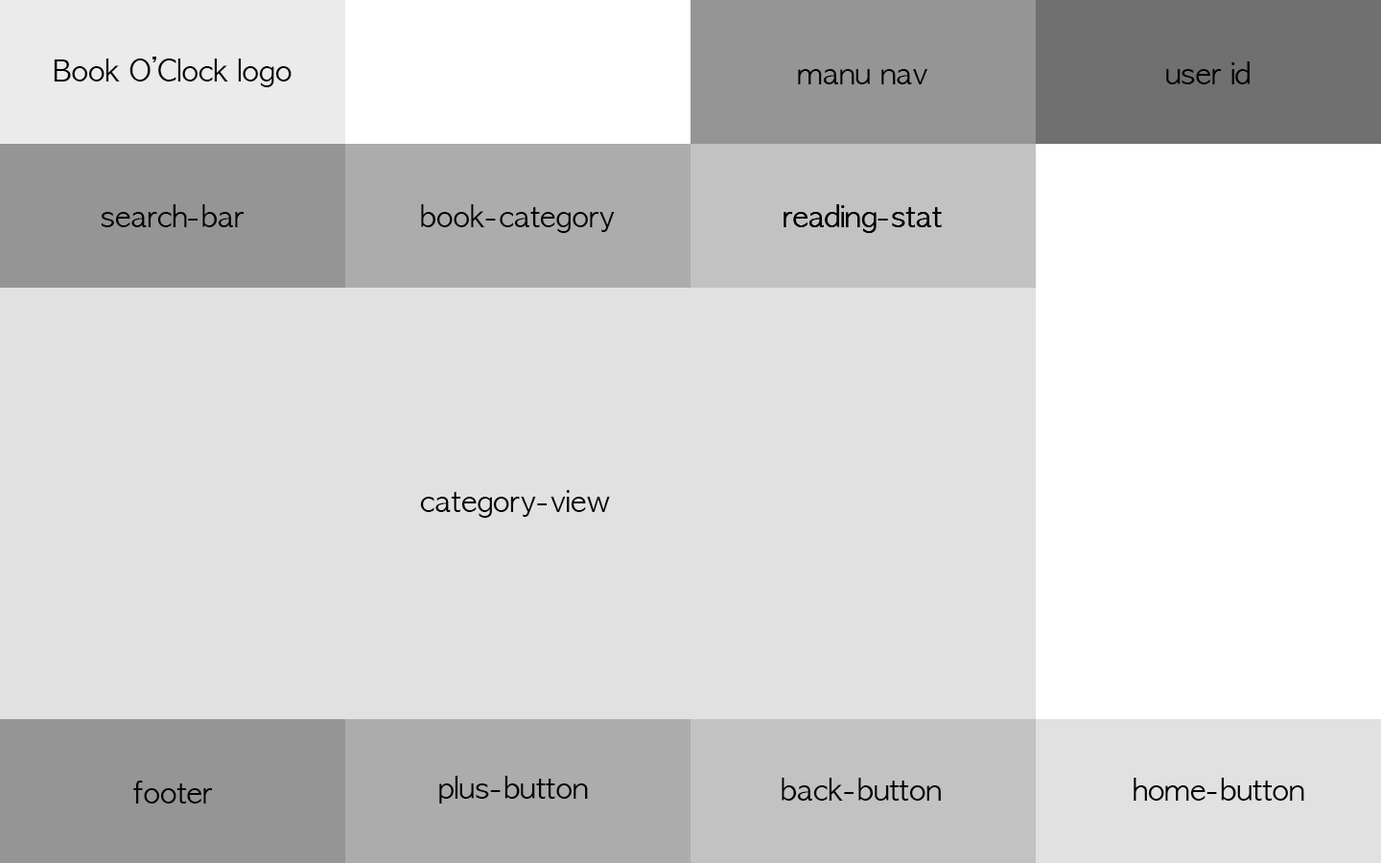
<style>
.page{position:relative;width:1381px;height:863px;background:#e1e1e1}
.page>*{position:absolute;margin:0}
.t1{font:28.8px "AppleGothic";color:#000000}
</style>
<div class="page">
<p class="t1" style="left:54px;top:57px;width:238px;height:30px">Book O’Clock logo</p>
<p class="t1" style="left:1166px;top:61px;width:84px;height:23px">user id</p>
<p class="t1" style="left:798px;top:69px;width:130px;height:15px">manu nav</p>
<p class="t1" style="left:101px;top:204px;width:144px;height:23px">search-bar</p>
<p class="t1" style="left:421px;top:204px;width:194px;height:29px">book-category</p>
<p class="t1" style="left:784px;top:204px;width:158px;height:29px">reading-stat</p>
<p class="t1" style="left:784px;top:204px;width:158px;height:29px">reading-stat</p>
<p class="t1" style="left:420px;top:490px;width:190px;height:28px">category-view</p>
<p class="t1" style="left:133px;top:781px;width:80px;height:23px">footer</p>
<p class="t1" style="left:439px;top:776px;width:149px;height:28px">plus-button</p>
<p class="t1" style="left:782px;top:778px;width:159px;height:23px">back-button</p>
<p class="t1" style="left:1134px;top:778px;width:171px;height:23px">home-button</p>
</div>
